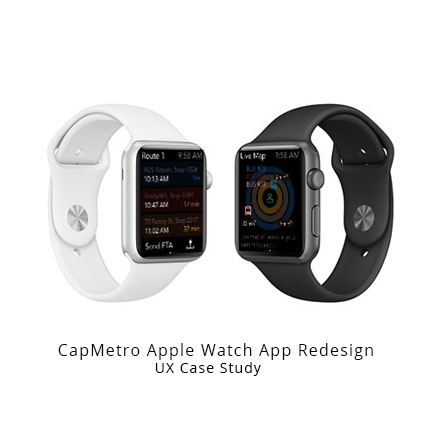
<style>
.page{position:relative;width:430px;height:430px;background:#ffffff}
.page>*{position:absolute;margin:0}
.t1{font:16px "OpenSans";letter-spacing:0.075em;color:#04060a}
.t2{font:14px "OpenSans";letter-spacing:0.075em;color:#04060a}
</style>
<div class="page">
<p class="t1" style="left:58px;top:343px;width:315px;height:33px">CapMetro Apple Watch App Redesign<span class="t2"> <br>                                                                UX Case Study</span></p>
</div>
